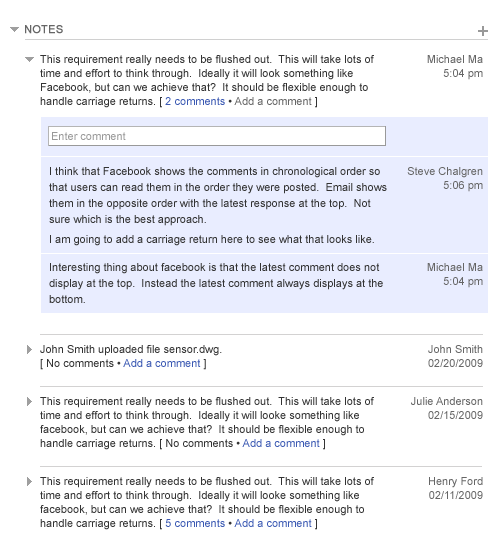
<style>
.page{position:relative;width:500px;height:550px;background:#ffffff}
.page>*{position:absolute;margin:0}
.t1{font:11px "ArialMT";color:#666666;text-transform:uppercase;font-weight:bold}
.t2{font:11px "ArialMT";color:#666666;font-weight:bold}
.t3{font:11px/14px "ArialMT";color:#333333}
.t4{font:11px/14px "ArialMT";color:#3c5ab3}
.t5{font:11px/14px "ArialMT";color:#666666}
.t6{font:11px "ArialMT";color:#999999}
.t7{font:11px/16px "ArialMT";color:#333333}
.t8{font:11px/20px "ArialMT";color:#333333}
</style>
<div class="page">
<p class="t1" style="left:25px;top:25px;width:38px;height:9px"><span class="t2">N</span>otes</p>
<p class="t3" style="left:40px;top:55px;width:334px;height:53px">This requirement really needs to be flushed out.  This will take lots of <br>time and effort to think through.  Ideally it will look something like<br>Facebook, but can we achieve that?  It should be flexible enough to<br>handle carriage returns. [ <span class="t4">2 comments</span> • <span class="t5">Add a comment </span>]</p>
<p class="t5" style="left:427px;top:55px;width:56px;height:25px;text-align:right">Michael Ma<br>5:04 pm</p>
<p class="t6" style="left:52px;top:132px;width:74px;height:8px">Enter comment</p>
<p class="t7" style="left:49px;top:167px;width:338px;height:79px">I think that Facebook shows the comments in chronological order so<br>that users can read them in the order they were posted.  Email shows<br>them in the opposite order with the latest response at the top.  Not<br>sure which is the best approach.<br><span class="t8">I am going to add a carriage return here to see what that looks like.</span></p>
<p class="t5" style="left:407px;top:167px;width:76px;height:25px;text-align:right">Steve Chalgren<br>5:06 pm</p>
<p class="t7" style="left:49px;top:263px;width:334px;height:40px">Interesting thing about facebook is that the latest comment does not<br>display at the top.  Instead the latest comment always displays at the<br>bottom.</p>
<p class="t5" style="left:427px;top:263px;width:56px;height:25px;text-align:right">Michael Ma<br>5:04 pm</p>
<p class="t3" style="left:40px;top:345px;width:182px;height:25px">John Smith uploaded file sensor.dwg. <br>[ No comments •<span class="t4"> Add a comment </span>]</p>
<p class="t5" style="left:428px;top:345px;width:55px;height:22px;text-align:right">John Smith<br>02/20/2009</p>
<p class="t3" style="left:40px;top:397px;width:334px;height:53px">This requirement really needs to be flushed out.  This will take lots of <br>time and effort to think through.  Ideally it will looke something like<br>facebook, but can we achieve that?  It should be flexible enough to<br>handle carriage returns. [ No comments •<span class="t4"> Add a comment </span>]</p>
<p class="t5" style="left:411px;top:397px;width:72px;height:22px;text-align:right">Julie Anderson<br>02/15/2009</p>
<p class="t3" style="left:40px;top:477px;width:334px;height:53px">This requirement really needs to be flushed out.  This will take lots of <br>time and effort to think through.  Ideally it will looke something like<br>facebook, but can we achieve that?  It should be flexible enough to<br>handle carriage returns. [ <span class="t4">5 comments</span> •<span class="t4"> Add a comment </span>]</p>
<p class="t5" style="left:429px;top:477px;width:54px;height:22px;text-align:right">Henry Ford<br>02/11/2009</p>
</div>
